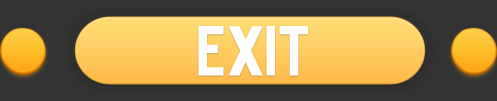
<style>
.page{position:relative;width:497px;height:101px;background:#333333}
.page>*{position:absolute;margin:0}
.t1{font:63.8px "UniversalKnowledge";letter-spacing:-0.025em;color:#ffffff;text-transform:uppercase}
</style>
<div class="page">
<p class="t1" style="left:198px;top:26px;width:110px;height:50px">Exit</p>
</div>
